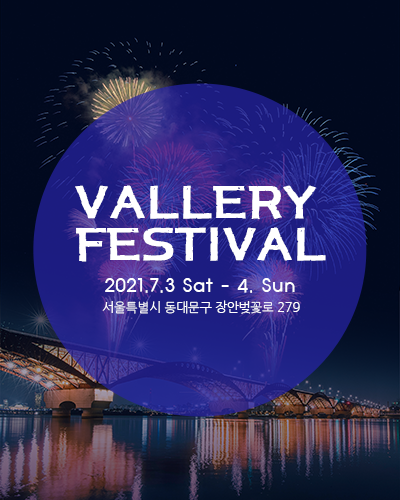
<style>
.page{position:relative;width:400px;height:500px}
.page>*{position:absolute;margin:0}
.t1{font:45px/41.7px "H2mkpB";letter-spacing:-0.07em;color:#ffffff;text-transform:uppercase;font-weight:bold;scale:1.11 1}
.t2{font:20.8px "HYnamB";color:#ffffff}
.t3{font:12.5px "NanumGothic";color:#ffffff}
</style>
<div class="page">
<p class="t1" style="left:75px;top:185px;width:251px;height:77px;text-align:justify">Vallery<br>Festival</p>
<p class="t2" style="left:105px;top:278px;width:190px;height:15px">2021.7.3 Sat - 4. Sun</p>
<p class="t3" style="left:102px;top:300px;width:198px;height:14px">서울특별시 동대문구 장안벚꽃로 279</p>
</div>
